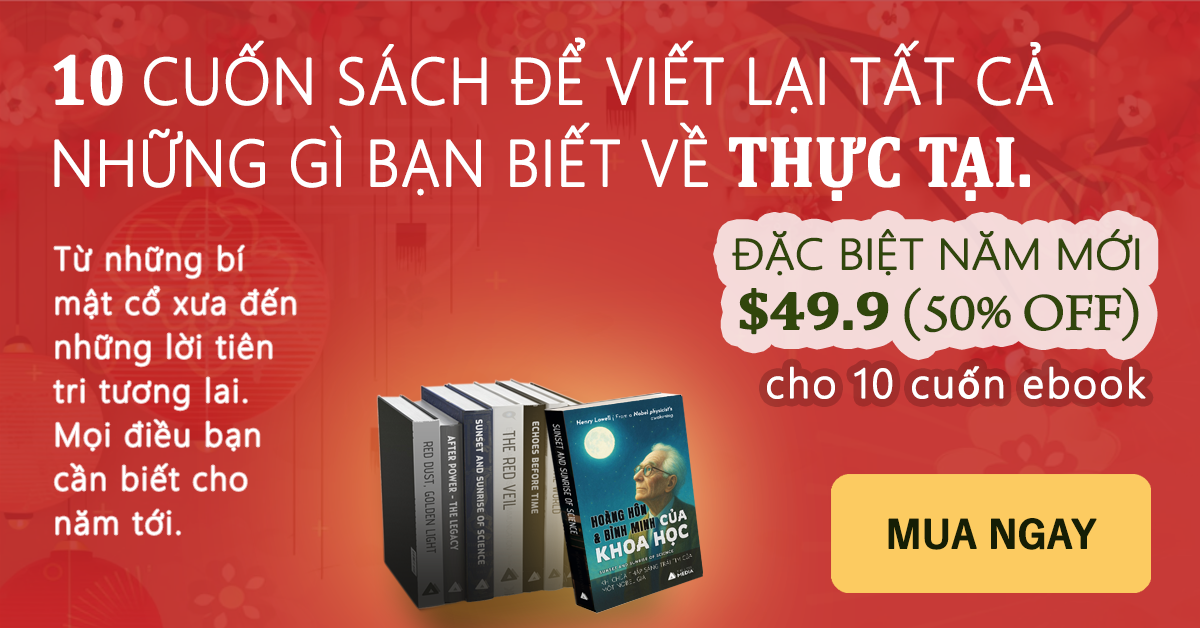
<style>
.page{position:relative;width:1200px;height:628px}
.page>*{position:absolute;margin:0}
.t1{font:65px/82px "SegoeUI-Light";color:#ffffff;font-weight:bold;scale:0.95 1}
.t2{font:71.5px/82px "Cambria-Bold";color:#ffffff;font-weight:bold;scale:0.86 1}
.t3{font:43.2px/60px "SegoeUI-Light";letter-spacing:-0.025em;color:#31460c;font-weight:bold;scale:1.11 1}
.t4{font:54px/60px "Cambria-Bold";letter-spacing:-0.025em;color:#31460c;font-weight:bold;scale:1.11 1}
.t5{font:54px/60px "ArnoPro-LightDisplay";letter-spacing:-0.025em;color:#31460c;font-weight:bold;scale:1.11 1}
.t6{font:32.4px/44px "SegoeUI-Light";letter-spacing:0.05em;color:#ffffff;font-weight:bold}
.t7{font:40px "MalgunGothic-Semilight";letter-spacing:0.05em;color:#ffffff;font-weight:bold}
.t8{font:40px "MyriadPro-Regular";letter-spacing:0.05em;color:#ffffff;font-weight:bold}
.t9{font:37.8px "YuGothic-Bold";letter-spacing:-0.025em;color:#151e05;font-weight:bold}
</style>
<div class="page">
<p class="t1" style="left:53px;top:37px;width:1001px;height:164px"><span class="t2">10 </span>CUỐN SÁCH ĐỂ VIẾT LẠI TẤT CẢ NHỮNG GÌ BẠN BIẾT VỀ<span class="t2"> THỰC TẠI.</span></p>
<p class="t3" style="left:732px;top:229px;width:408px;height:113px;text-align:right">ĐẶC BIỆT NĂM MỚI<br><span class="t4">$49.9</span><span class="t5"> (50% OFF)</span></p>
<p class="t6" style="left:53px;top:245px;width:243px;height:290px">Từ những bí mật cổ xưa đến những lời tiên tri tương lai. Mọi điều bạn cần biết cho năm tới.</p>
<p class="t7" style="left:767px;top:366px;width:379px;height:33px">cho 10 cu<span class="t8">ố</span>n ebook</p>
<p class="t9" style="left:888px;top:518px;width:209px;height:32px">MUA NGAY</p>
</div>
